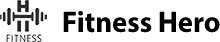
<style>
.page{position:relative;width:220px;height:42px;background:#ffffff}
.page>*{position:absolute;margin:0}
.t1{font:30px "MyriadPro-Bold";color:#000000;scale:0.96 1}
</style>
<div class="page">
<p class="t1" style="left:63px;top:11px;width:157px;height:22px">Fitness Hero</p>
</div>
